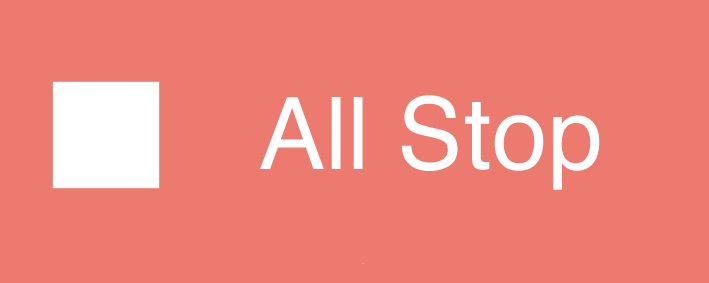
<style>
.page{position:relative;width:709px;height:283px;background:#ed7a6e}
.page>*{position:absolute;margin:0}
.t1{font:100px "Helvetica";color:#ffffff}
</style>
<div class="page">
<p class="t1" style="left:260px;top:95px;width:340px;height:95px">All Stop</p>
</div>
